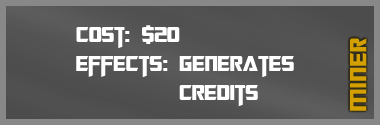
<style>
.page{position:relative;width:380px;height:125px}
.page>*{position:absolute;margin:0}
.t1{font:24px "TransformersMovie";color:#ffffff}
.t2{font:24px "TransformersMovie";letter-spacing:0.04em;color:#ffffff}
.t3{font:26px "TransformersMovie";letter-spacing:0.06em;color:#d49f00}
.t4{font:26px "TransformersMovie";letter-spacing:0.02em;color:#d49f00}
</style>
<div class="page">
<p class="t1" style="left:76px;top:25px;width:218px;height:53px">Cost: $20<br>effect<span class="t2">s</span>: generates</p>
<p class="t3" style="left:350px;top:38px;width:17px;height:73px;rotate:-90deg">min<span class="t4">e</span>r</p>
<p class="t1" style="left:179px;top:85px;width:79px;height:22px">credits</p>
</div>
